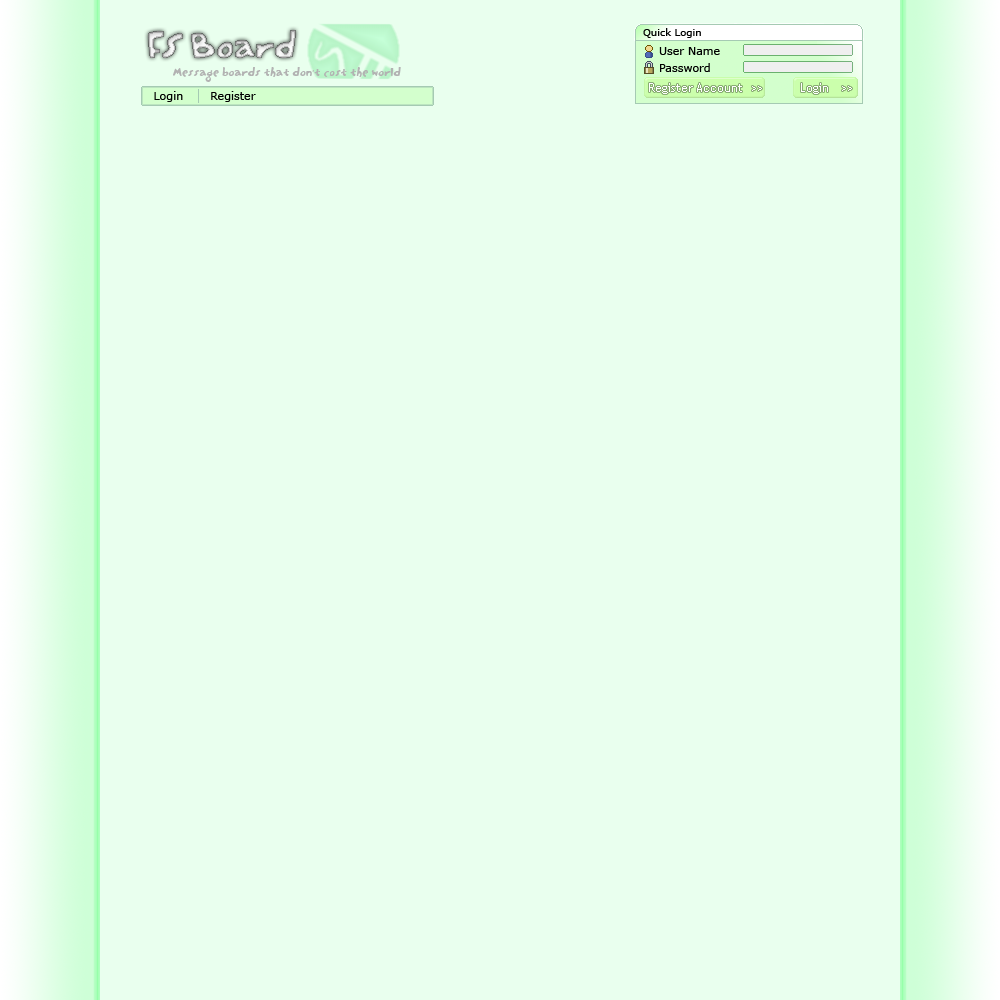
<style>
.page{position:relative;width:1000px;height:1000px;background:#e9ffee}
.page>*{position:absolute;margin:0}
.t1{font:10px "Verdana";color:#000000}
.t2{font:11px "Verdana";color:#000000}
.t3{font:12px "TrebuchetMS";color:#ffffff}
</style>
<div class="page">
<p class="t1" style="left:643px;top:28px;width:58px;height:10px">Quick Login</p>
<p class="t2" style="left:659px;top:47px;width:61px;height:8px">User Name</p>
<p class="t2" style="left:660px;top:63px;width:50px;height:9px">Password</p>
<p class="t3" style="left:649px;top:83px;width:113px;height:11px">Register Account  &gt;&gt;</p>
<p class="t3" style="left:801px;top:83px;width:51px;height:11px">Login   &gt;&gt;</p>
<p class="t2" style="left:154px;top:91px;width:102px;height:11px">Login       Register</p>
</div>
